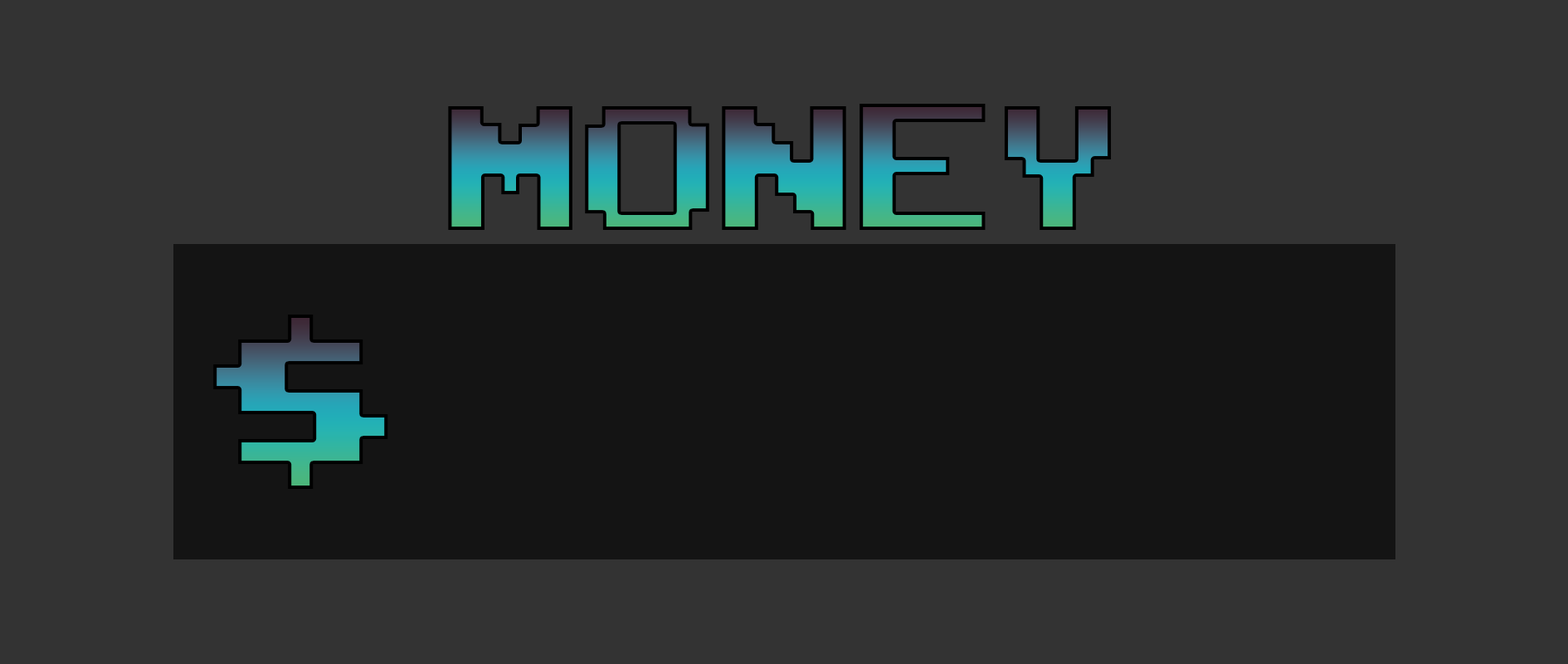
<style>
.page{position:relative;width:1568px;height:664px;background:#333333}
.page>*{position:absolute;margin:0}
.t1{font:248.9px "ArcadeClassic"}
.t2{font:248.9px "JoystixMonospace-Regular"}
</style>
<div class="page">
<p class="t1" style="left:448px;top:104px;width:664px;height:126px">MONEY</p>
<p class="t2" style="left:213px;top:314px;width:175px;height:175px">$</p>
</div>
